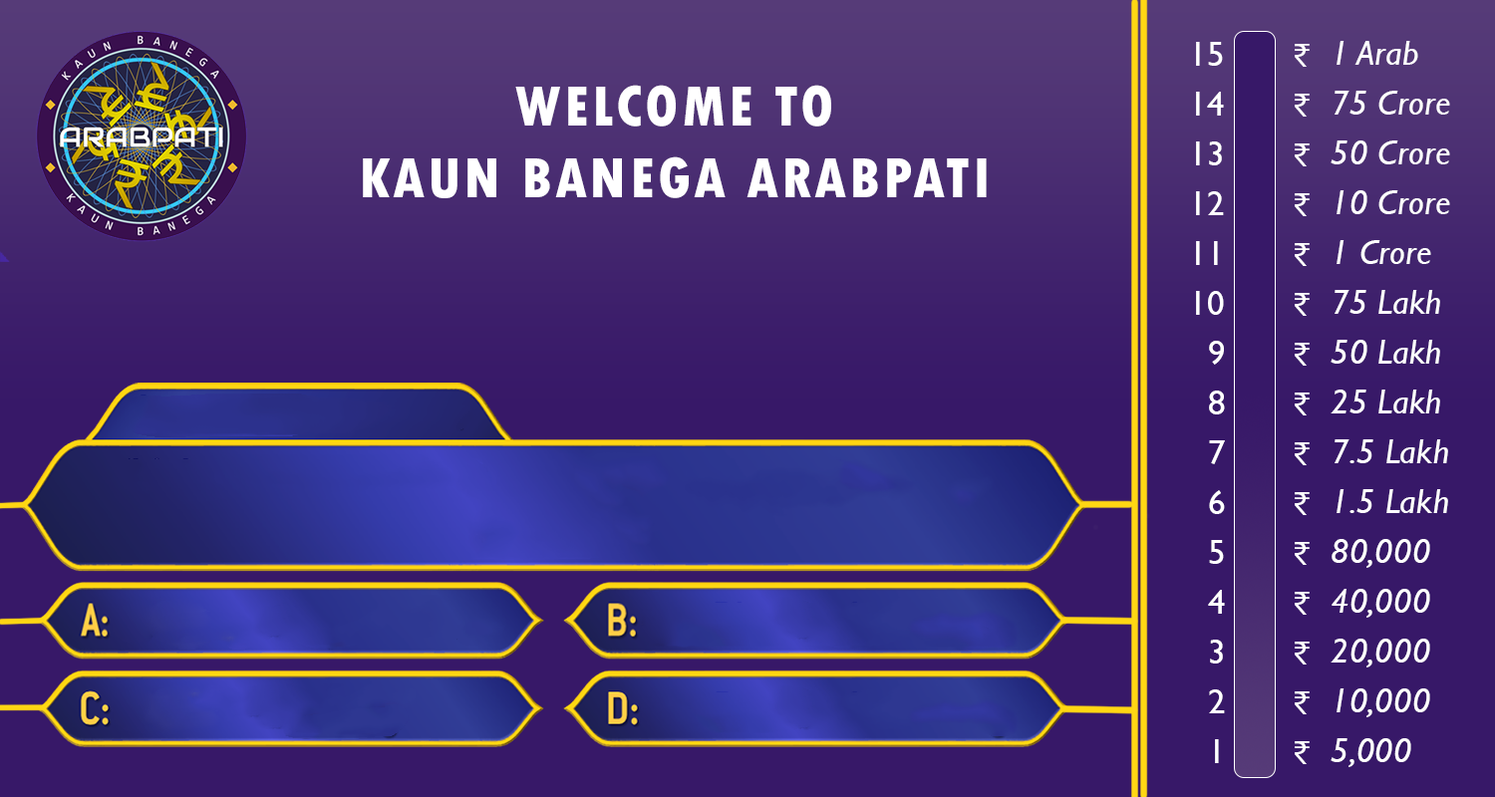
<style>
.page{position:relative;width:1495px;height:797px;background:#371868}
.page>*{position:absolute;margin:0}
.t1{font:34.9px/49.8px "GillSansMT";letter-spacing:0.01em;color:#ffffff}
.t2{font:34.9px/49.8px "GillSansMT-Italic";letter-spacing:0.01em;color:#ffffff}
.t3{font:34.9px/49.8px "MyriadPro-Regular";letter-spacing:0.01em;color:#ffffff}
.t4{font:59.8px/71.8px "TwCenMT-CondensedExtraBold";letter-spacing:0.05em;color:#ffffff}
</style>
<div class="page">
<p class="t1" style="left:1196px;top:42px;width:29px;height:722px;text-align:center">15<br>14<br>13<br>12<br>11<br>10<br>  9<br>  8<br>  7<br>  6<br>  5<br>  4<br>  3<br>  2<br>  1</p>
<p class="t2" style="left:1331px;top:41px;width:119px;height:727px">1 Arab<br>75 Crore<br>50 Crore<br>10 Crore<br>1 Crore<br>75 Lakh<br>50 Lakh<br>25 Lakh<br>7.5 Lakh<br>1.5 Lakh<br>80,000<br>40,000<br>20,000<br>10,000<br>5,000</p>
<p class="t3" style="left:1295px;top:44px;width:15px;height:721px;text-align:center">₹<br>₹<br>₹<br>₹<br>₹<br>₹<br>₹<br>₹<br>₹<br>₹<br>₹<br>₹<br>₹<br>₹<br>₹</p>
<p class="t4" style="left:363px;top:85px;width:624px;height:113px;text-align:center">WELCOME TO<br>KAUN BANEGA ARABPATI</p>
</div>
